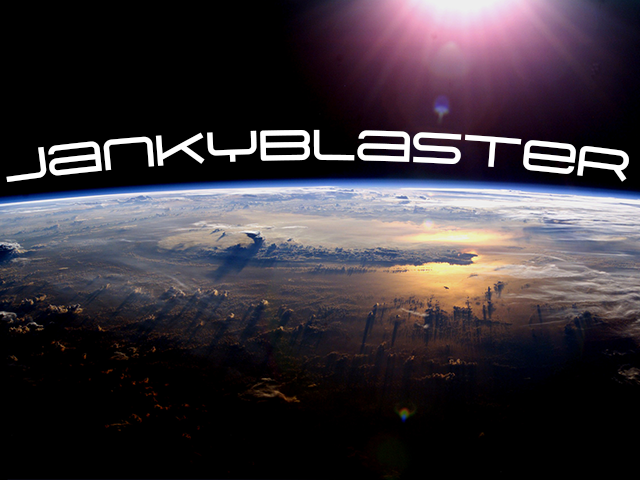
<style>
.page{position:relative;width:640px;height:480px;background:#000000}
.page>*{position:absolute;margin:0}
.t1{font:55px "Suissnord";color:#ffffff}
</style>
<div class="page">
<p class="t1" style="left:6px;top:129px;width:623px;height:54px">JankyBlaster</p>
</div>
